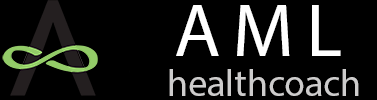
<style>
.page{position:relative;width:377px;height:100px;background:#000000}
.page>*{position:absolute;margin:0}
.t1{font:75.9px "MyriadPro-Regular";letter-spacing:0.16em;color:#ffffff}
.t2{font:38px "MyriadPro-Regular";color:#cdcccc}
</style>
<div class="page">
<p class="t1" style="left:176px;top:5px;width:165px;height:51px">AML</p>
<p class="t2" style="left:169px;top:69px;width:190px;height:27px">healthcoach</p>
</div>
